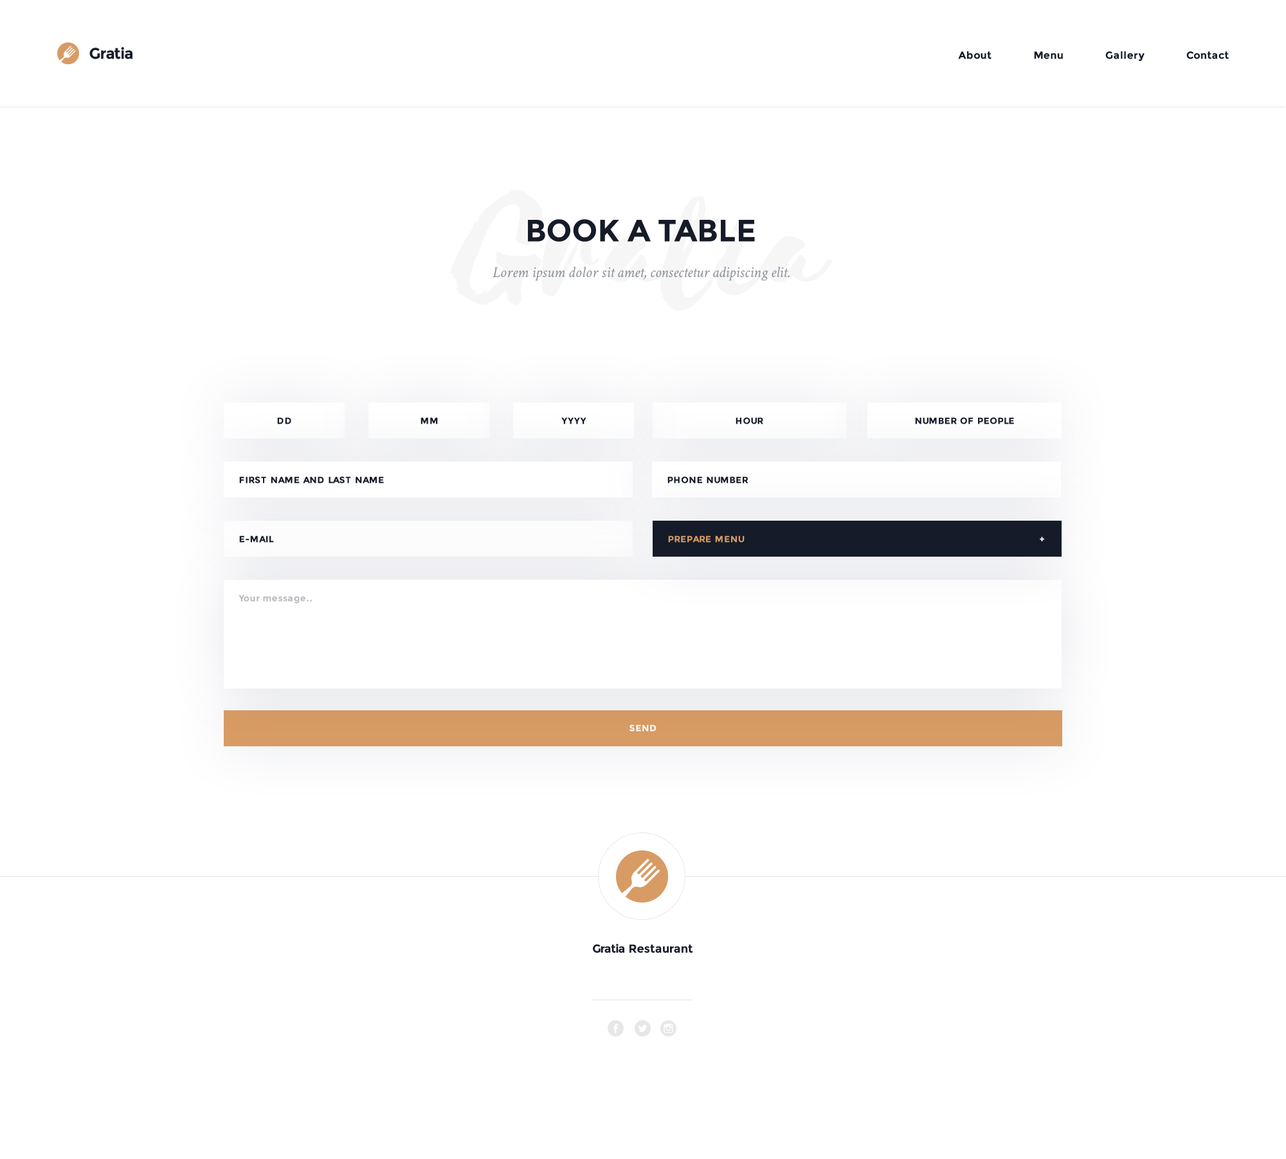
<style>
.page{position:relative;width:1286px;height:1159px;background:#ffffff}
.page>*{position:absolute;margin:0}
.t1{font:15.4px "Montserrat-Bold";color:#151b28}
.t2{font:10.3px "Montserrat-Bold";letter-spacing:0.025em;color:#151b28}
.t3{font:30.9px "Montserrat-Bold";color:#151b28}
.t4{font:15.4px "CrimsonText-Italic";color:#8b909d}
.t5{font:9px "Montserrat-Bold";letter-spacing:0.025em;color:#151b29}
.t6{font:9px "Montserrat-Bold";letter-spacing:0.025em;color:#d89b64}
.t7{font:9px "Montserrat-Bold";letter-spacing:0.025em;color:#ffffff}
.t8{font:9px "Montserrat-Bold";letter-spacing:0.025em;color:#b8babe}
.t9{font:11.6px "Montserrat-Bold";color:#161b29}
</style>
<div class="page">
<p class="t1" style="left:89px;top:47px;width:43px;height:12px">Gratia</p>
<p class="t2" style="left:958px;top:51px;width:271px;height:10px">About               Menu               Gallery               Contact</p>
<p class="t3" style="left:528px;top:219px;width:227px;height:23px">BOOK A TABLE</p>
<p class="t4" style="left:492px;top:267px;width:297px;height:14px">Lorem ipsum dolor sit amet, consectetur adipiscing elit.</p>
<p class="t5" style="left:277px;top:417px;width:14px;height:7px">DD</p>
<p class="t5" style="left:420px;top:417px;width:18px;height:7px">MM</p>
<p class="t5" style="left:561px;top:417px;width:25px;height:7px">YYYY</p>
<p class="t5" style="left:735px;top:417px;width:28px;height:7px">HOUR</p>
<p class="t5" style="left:915px;top:417px;width:99px;height:7px">NUMBER OF PEOPLE</p>
<p class="t5" style="left:239px;top:476px;width:145px;height:7px">FIRST NAME AND LAST NAME</p>
<p class="t5" style="left:667px;top:476px;width:81px;height:7px">PHONE NUMBER</p>
<p class="t5" style="left:239px;top:535px;width:35px;height:8px">E-MAIL</p>
<p class="t6" style="left:668px;top:535px;width:76px;height:8px">PREPARE MENU</p>
<p class="t7" style="left:1039px;top:537px;width:5px;height:4px">+</p>
<p class="t8" style="left:238px;top:595px;width:74px;height:9px">Your message..</p>
<p class="t7" style="left:629px;top:724px;width:27px;height:8px">SEND</p>
<p class="t9" style="left:593px;top:944px;width:100px;height:9px">Gratia Restaurant</p>
</div>
